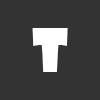
<style>
.page{position:relative;width:100px;height:100px;background:#333333}
.page>*{position:absolute;margin:0}
.t1{font:58.3px "ShowcardGothic-Reg";color:#ffffff}
</style>
<div class="page">
<p class="t1" style="left:32px;top:28px;width:36px;height:44px">t</p>
</div>
